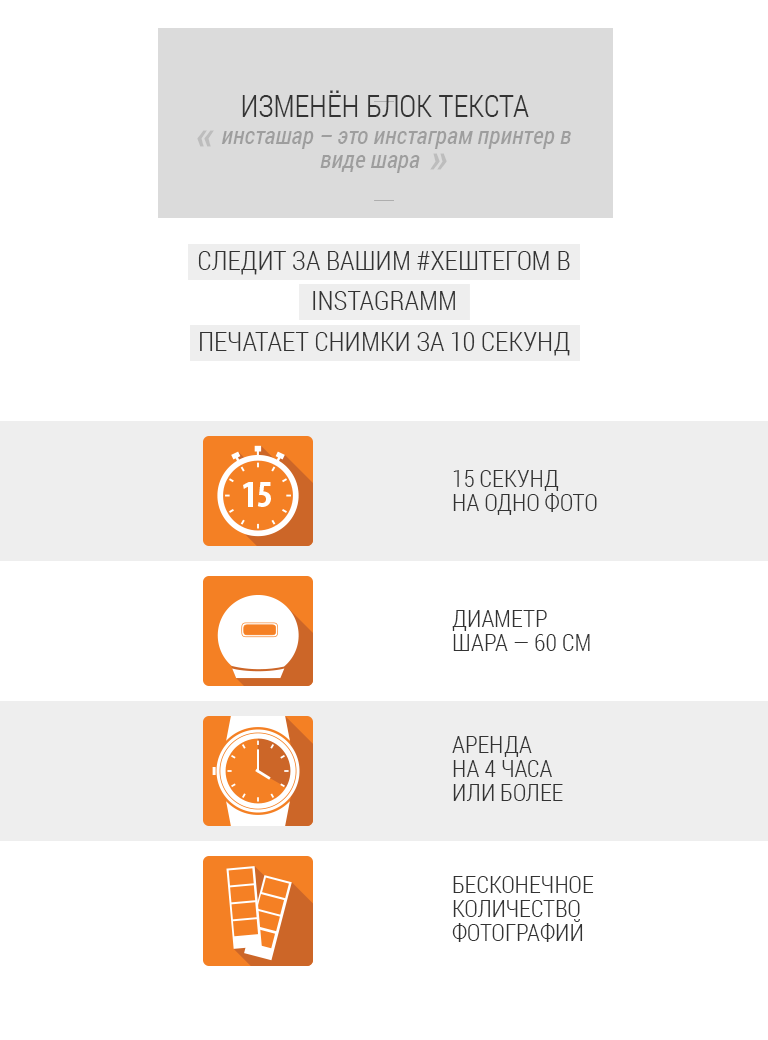
<style>
.page{position:relative;width:768px;height:1040px;background:#ffffff}
.page>*{position:absolute;margin:0}
.t1{font:30px "RobotoCondensed-Light";color:#333333;text-transform:uppercase}
.t2{font:24px "RobotoCondensed-Italic";color:#333333}
.t3{font:40px "RobotoCondensed-BoldItalic";color:#999999}
.t4{font:27px/40.5px "RobotoCondensed-Light";color:#333333;text-transform:uppercase}
.t5{font:24px/24px "RobotoCondensed-Light";color:#333333;text-transform:uppercase}
</style>
<div class="page">
<p class="t1" style="left:242px;top:90px;width:287px;height:27px">изменён блок текста</p>
<p class="t2" style="left:197px;top:130px;width:374px;height:43px"><span class="t3">« </span>инсташар – это инстаграм принтер в виде шара  <span class="t3">»</span></p>
<p class="t4" style="left:198px;top:251px;width:372px;height:105px;text-align:center">СЛЕДИТ ЗА ВАШИМ #ХЕШТЕГОМ В<br>Instagramm<br>ПЕЧАТАЕТ СНИМКИ ЗА 10 СЕКУНД</p>
<p class="t5" style="left:453px;top:470px;width:144px;height:45px">15 секунд<br>на одно фото</p>
<p class="t5" style="left:452px;top:610px;width:138px;height:41px">диаметр<br>шара — 60 см</p>
<p class="t5" style="left:452px;top:736px;width:111px;height:65px">аренда<br>на 4 часа<br>или более</p>
<p class="t5" style="left:452px;top:876px;width:142px;height:66px">бесконечное количество фотографий</p>
</div>
